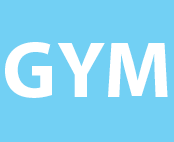
<style>
.page{position:relative;width:174px;height:142px;background:#72d0f4}
.page>*{position:absolute;margin:0}
.t1{font:80px "MyriadPro-Bold";color:#ffffff}
</style>
<div class="page">
<p class="t1" style="left:5px;top:42px;width:163px;height:56px">GYM</p>
</div>
